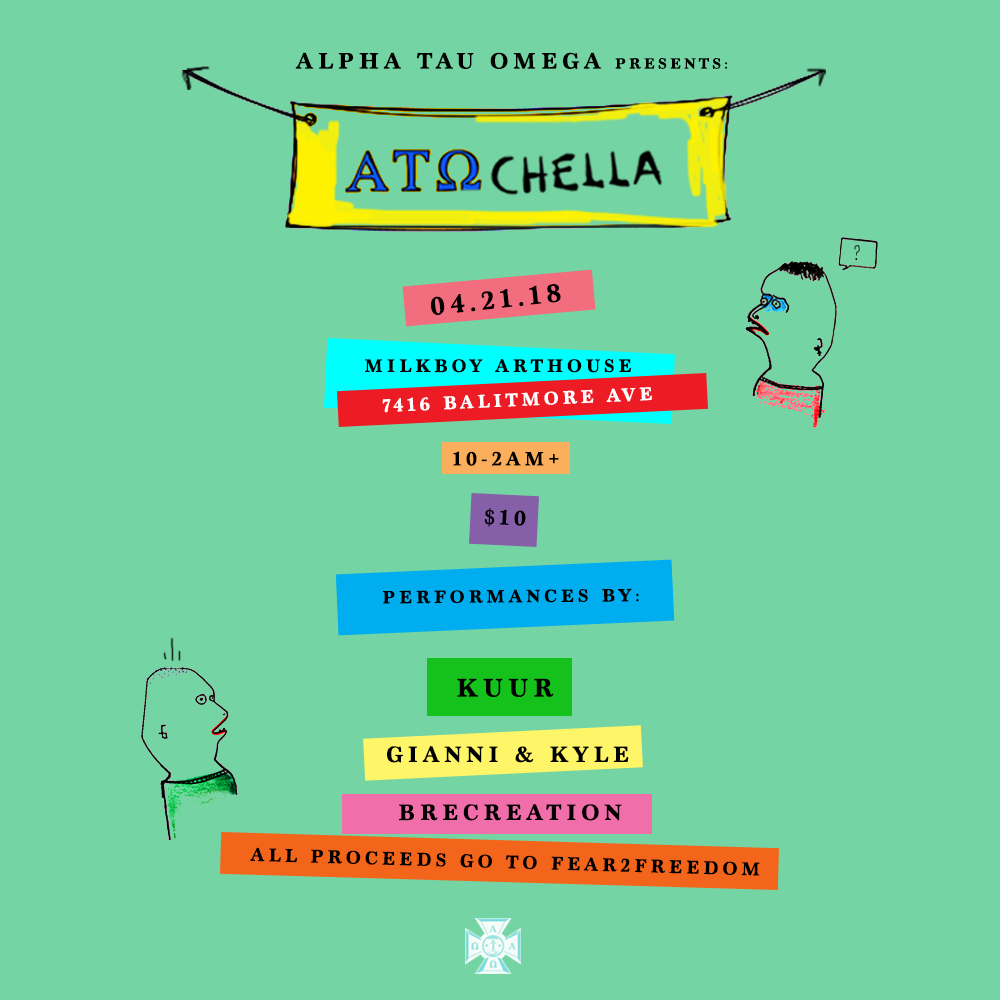
<style>
.page{position:relative;width:1000px;height:1000px;background:#75d4a3}
.page>*{position:absolute;margin:0}
.t1{font:23.3px "Marion-Bold";letter-spacing:0.2em;color:#000000}
.t2{font:15.5px "Marion-Bold";letter-spacing:0.2em;color:#000000}
.t3{font:26.7px "Marion-Bold";letter-spacing:0.2em;color:#000000}
.t4{font:19px "Marion-Bold";letter-spacing:0.2em;color:#000000}
.t5{font:19px "Marion-Bold";letter-spacing:0.2em;color:#ffffff}
.t6{font:20.3px "Marion-Bold";letter-spacing:0.2em;color:#000000}
.t7{font:21.9px "Marion-Bold";letter-spacing:0.2em;color:#000000}
.t8{font:18.6px "Marion-Bold";letter-spacing:0.2em;color:#000000}
.t9{font:26.5px "Marion-Bold";letter-spacing:0.2em;color:#000000}
.t10{font:19.3px "Marion-Bold";letter-spacing:0.2em;color:#000000}
</style>
<div class="page">
<p class="t1" style="left:295px;top:52px;width:433px;height:17px">ALPHA TAU OMEGA <span class="t2">PRESENTS:</span></p>
<p class="t3" style="left:431px;top:284px;width:130px;height:32px;rotate:-6deg">04.21.18</p>
<p class="t4" style="left:365px;top:359px;width:266px;height:14px">MILKBOY ARTHOUSE</p>
<p class="t5" style="left:382px;top:387px;width:270px;height:26px;rotate:-3deg">7416 BALITMORE AVE</p>
<p class="t6" style="left:453px;top:451px;width:106px;height:15px">10-2AM+</p>
<p class="t7" style="left:484px;top:508px;width:42px;height:19px;rotate:3deg">$10</p>
<p class="t8" style="left:382px;top:588px;width:257px;height:16px;rotate:-1deg">PERFORMANCES BY:</p>
<p class="t9" style="left:457px;top:678px;width:97px;height:19px">KUUR</p>
<p class="t1" style="left:387px;top:746px;width:242px;height:17px">GIANNI &amp; KYLE</p>
<p class="t1" style="left:399px;top:804px;width:223px;height:17px">BRECREATION</p>
<p class="t10" style="left:250px;top:847px;width:510px;height:29px;rotate:2deg">ALL PROCEEDS GO TO FEAR2FREEDOM</p>
</div>
